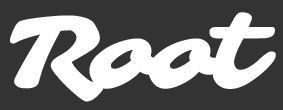
<style>
.page{position:relative;width:283px;height:110px;background:#333333}
.page>*{position:absolute;margin:0}
.t1{font:106px "Sarina-Regular";letter-spacing:-0.075em;color:#ffffff;scale:0.94 1}
</style>
<div class="page">
<p class="t1" style="left:10px;top:12px;width:266px;height:90px">Root</p>
</div>
